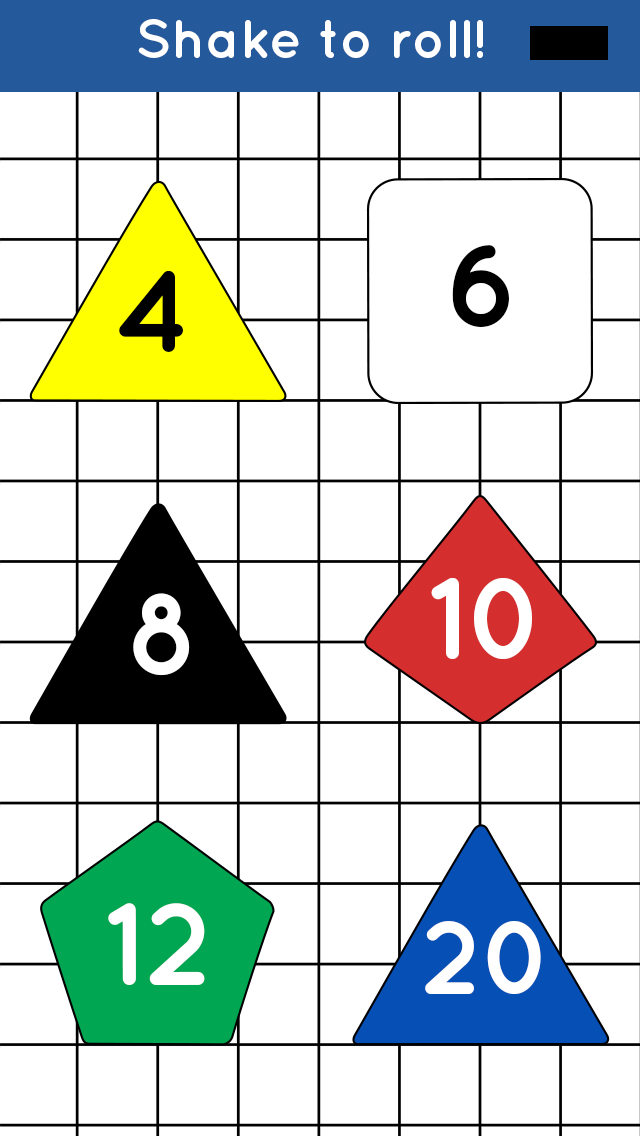
<style>
.page{position:relative;width:640px;height:1136px;background:#ffffff}
.page>*{position:absolute;margin:0}
.t1{font:54.2px "QuicksandBold-Regular";color:#ffffff}
.t2{font:116.7px "QuicksandBold-Regular";color:#000000}
.t3{font:116.4px "QuicksandBold-Regular";color:#000000}
.t4{font:116.4px "QuicksandBold-Regular";color:#ffffff}
.t5{font:116.7px "QuicksandBold-Regular";color:#ffffff}
.t6{font:104.2px "QuicksandBold-Regular";color:#ffffff}
</style>
<div class="page">
<p class="t1" style="left:138px;top:19px;width:345px;height:39px">Shake to roll!</p>
<p class="t2" style="left:452px;top:245px;width:57px;height:83px">6</p>
<p class="t3" style="left:119px;top:271px;width:64px;height:81px">4</p>
<p class="t4" style="left:431px;top:577px;width:101px;height:83px">10</p>
<p class="t4" style="left:133px;top:593px;width:57px;height:83px">8</p>
<p class="t5" style="left:108px;top:903px;width:97px;height:82px">12</p>
<p class="t6" style="left:425px;top:921px;width:116px;height:73px">20</p>
</div>
